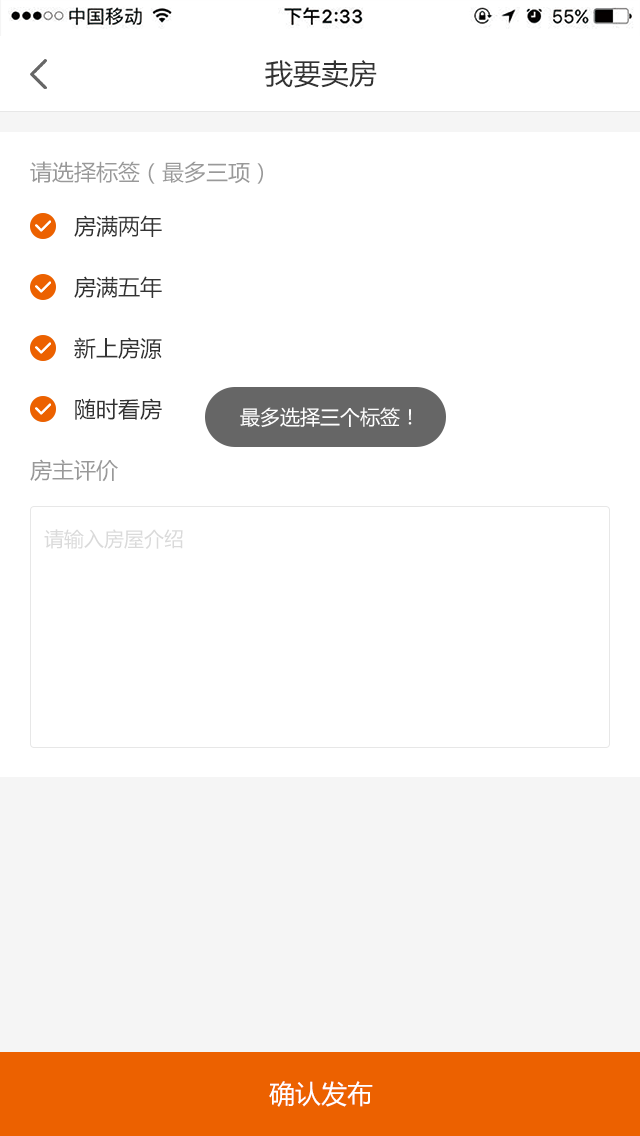
<style>
.page{position:relative;width:640px;height:1136px;background:#ffffff}
.page>*{position:absolute;margin:0}
.t1{font:28px "MicrosoftYaHei";color:#333333}
.t2{font:22px "MicrosoftYaHei";color:#999999}
.t3{font:22px "MicrosoftYaHei";color:#333333}
.t4{font:20px "MicrosoftYaHei";color:#ffffff}
.t5{font:20px "MicrosoftYaHei";color:#dadada}
.t6{font:26px "MicrosoftYaHei";color:#ffffff}
</style>
<div class="page">
<p class="t1" style="left:265px;top:60px;width:112px;height:28px">我要卖房</p>
<p class="t2" style="left:30px;top:161px;width:233px;height:23px">请选择标签（最多三项）</p>
<p class="t3" style="left:74px;top:215px;width:88px;height:22px">房满两年</p>
<p class="t3" style="left:74px;top:276px;width:88px;height:22px">房满五年</p>
<p class="t3" style="left:74px;top:337px;width:88px;height:22px">新上房源</p>
<p class="t3" style="left:75px;top:398px;width:87px;height:22px">随时看房</p>
<p class="t4" style="left:240px;top:407px;width:172px;height:20px">最多选择三个标签！</p>
<p class="t2" style="left:30px;top:459px;width:88px;height:23px">房主评价</p>
<p class="t5" style="left:44px;top:529px;width:139px;height:20px">请输入房屋介绍</p>
<p class="t6" style="left:269px;top:1081px;width:104px;height:26px">确认发布</p>
</div>
